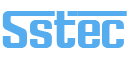
<style>
.page{position:relative;width:129px;height:60px;background:#ffffff}
.page>*{position:absolute;margin:0}
.t1{font:57px "FerroRosso";color:#55acee;scale:0.94 1}
</style>
<div class="page">
<p class="t1" style="left:2px;top:11px;width:125px;height:37px">Sstec</p>
</div>
